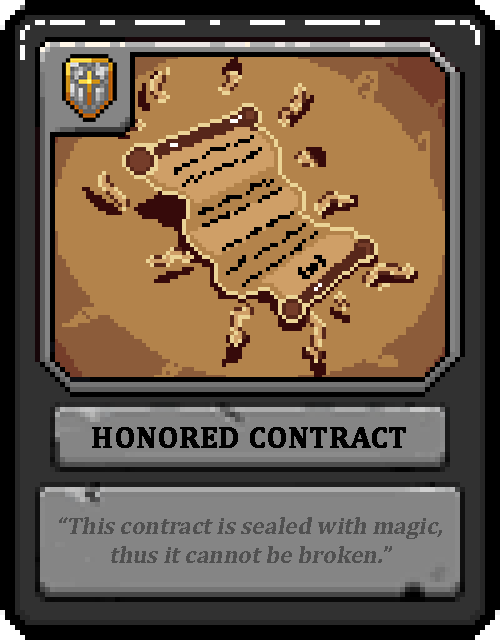
<style>
.page{position:relative;width:500px;height:640px;background:#b3834b}
.page>*{position:absolute;margin:0}
.t1{font:30px "Cambria-Bold";color:#000000;text-transform:uppercase;font-weight:bold}
.t2{font:24px "Cambria-Bold";color:#505050;font-style:italic}
</style>
<div class="page">
<p class="t1" style="left:92px;top:427px;width:314px;height:21px">Honored Contract</p>
<p class="t2" style="left:59px;top:517px;width:383px;height:46px;text-align:center">“This contract is sealed with magic, thus it cannot be broken.”</p>
</div>
